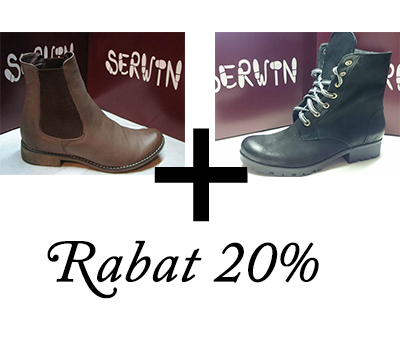
<style>
.page{position:relative;width:400px;height:350px;background:#ffffff}
.page>*{position:absolute;margin:0}
.t1{font:60px "ACaslonPro-Italic";letter-spacing:-0.01em;color:#000000;font-weight:bold}
</style>
<div class="page">
<p class="t1" style="left:47px;top:240px;width:272px;height:59px">Rabat 20%</p>
</div>
